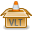
<style>
.page{position:relative;width:32px;height:32px;background:#ffffff}
.page>*{position:absolute;margin:0}
.t1{font:10px "Delicious-Roman"}
</style>
<div class="page">
<p class="t1" style="left:8px;top:19px;width:15px;height:7px">VLT</p>
</div>
